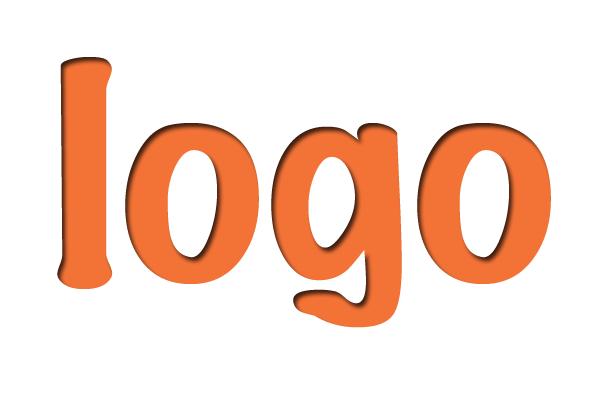
<style>
.page{position:relative;width:600px;height:400px;background:#ffffff}
.page>*{position:absolute;margin:0}
.t1{font:270.9px "MarkerFelt-Thin";color:#f37337;scale:1.3 1}
</style>
<div class="page">
<p class="t1" style="left:57px;top:57px;width:494px;height:271px">logo</p>
</div>
